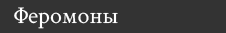
<style>
.page{position:relative;width:226px;height:33px;background:#333333}
.page>*{position:absolute;margin:0}
.t1{font:24px "CrimsonText-Regular";color:#ffffff}
</style>
<div class="page">
<p class="t1" style="left:14px;top:7px;width:104px;height:22px">Феромоны</p>
</div>
